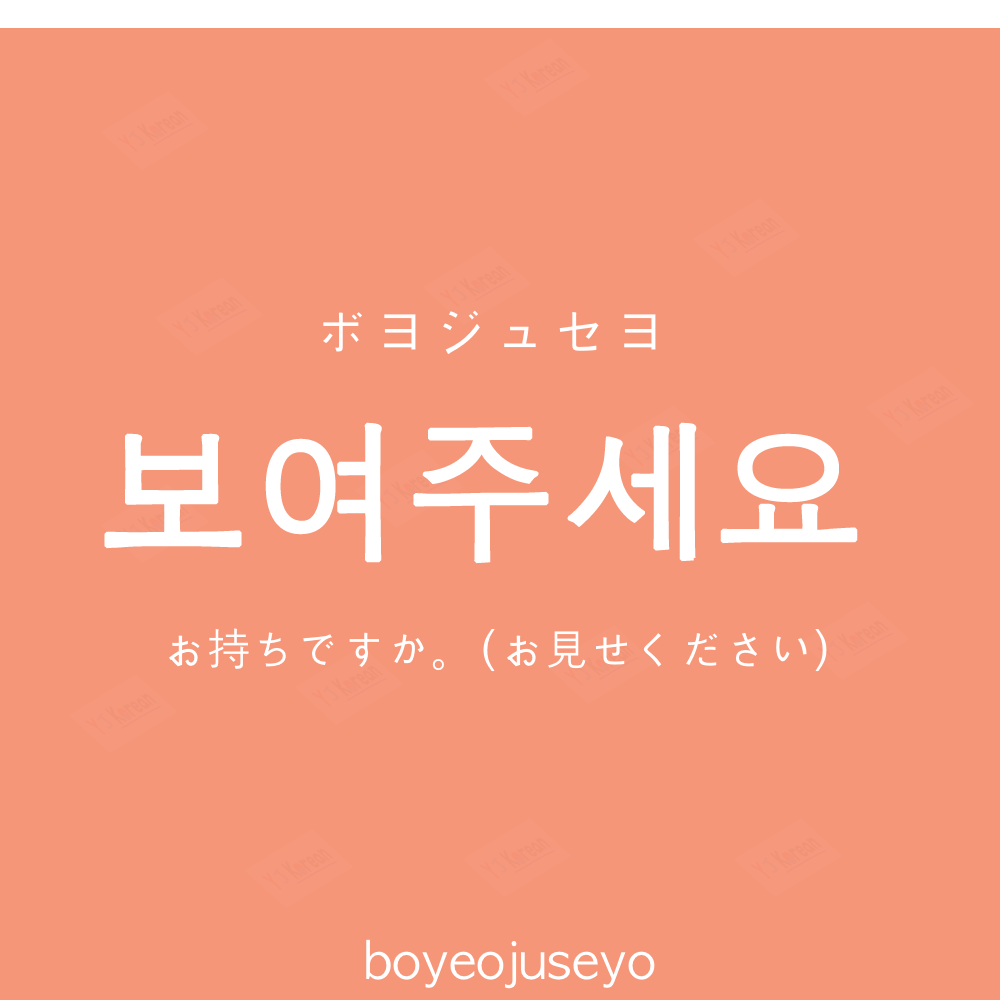
<style>
.page{position:relative;width:1000px;height:1000px;background:#f69679}
.page>*{position:absolute;margin:0}
.t1{font:60px "AppleGothic";color:#ffffff}
.t2{font:150px "AppleGothic";color:#ffffff;font-weight:bold}
.t3{font:45px "AppleGothic";color:#ffffff}
.t4{font:50px "AppleGothic";color:#ffffff}
</style>
<div class="page">
<p class="t1" style="left:323px;top:310px;width:333px;height:44px">ボヨジュセヨ</p>
<p class="t2" style="left:104px;top:422px;width:754px;height:142px">보여주세요</p>
<p class="t3" style="left:169px;top:628px;width:658px;height:44px">お持ちですか。(お見せください）</p>
<p class="t4" style="left:366px;top:939px;width:289px;height:50px">boyeojuseyo</p>
</div>
